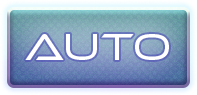
<style>
.page{position:relative;width:197px;height:95px}
.page>*{position:absolute;margin:0}
.t1{font:37.9px "EthnocentricLt-Regular";letter-spacing:0.075em;color:#ffffff}
</style>
<div class="page">
<p class="t1" style="left:25px;top:34px;width:144px;height:26px">Auto</p>
</div>
